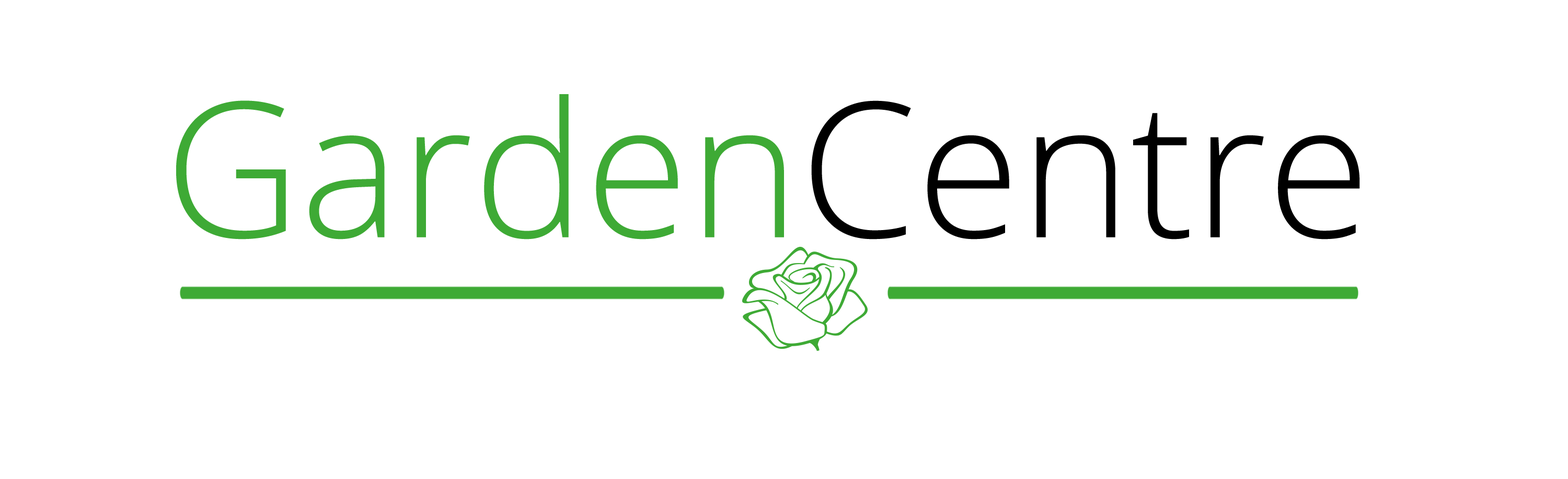
<style>
.page{position:relative;width:1568px;height:479px;background:#ffffff}
.page>*{position:absolute;margin:0}
.t1{font:188.2px "OpenSans-Light";color:#3eaa35}
.t2{font:188.2px "OpenSans-Light";color:#000000}
</style>
<div class="page">
<p class="t1" style="left:176px;top:94px;width:608px;height:145px">Garden</p>
<p class="t2" style="left:811px;top:100px;width:549px;height:139px">Centre</p>
</div>
